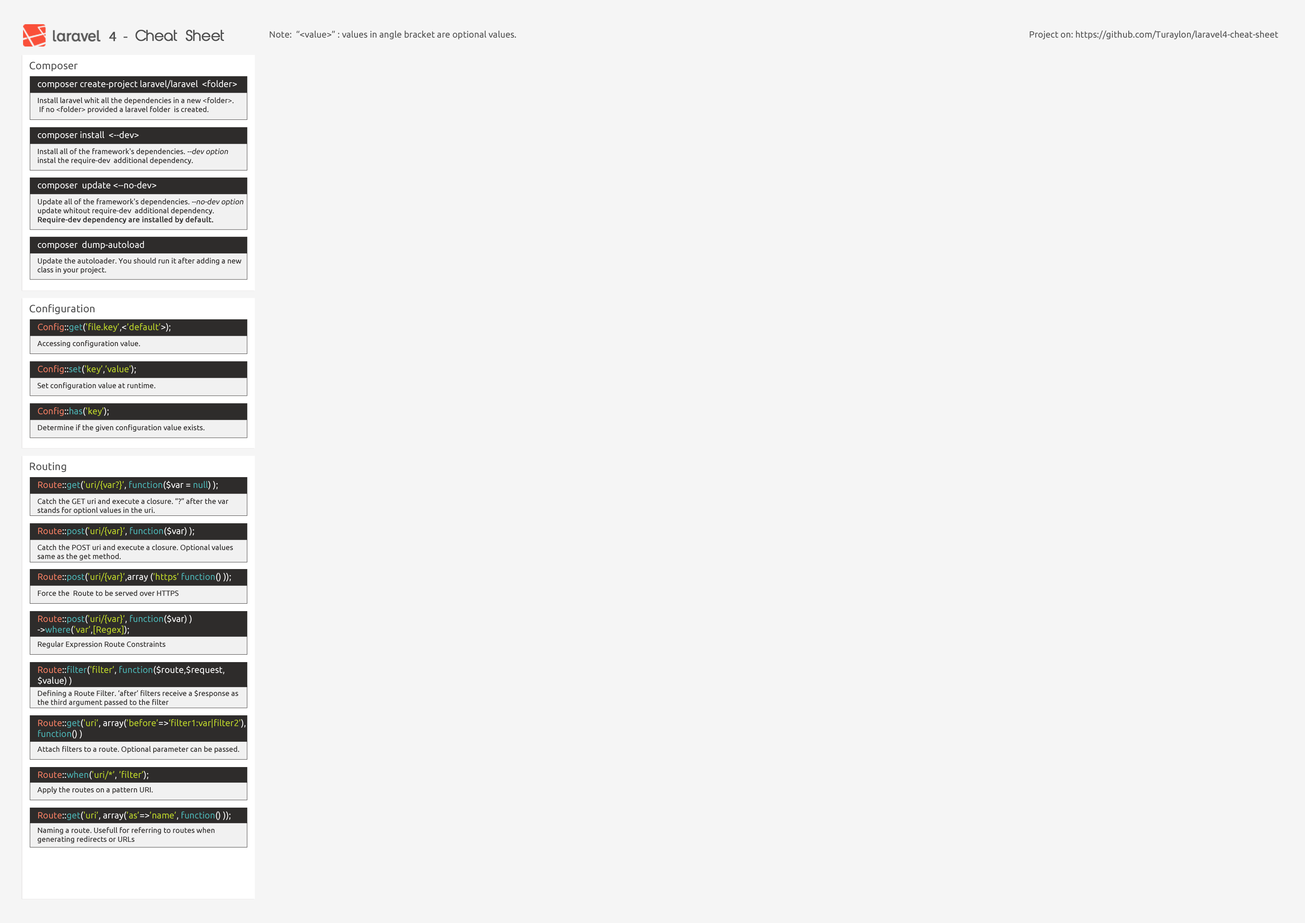
<style>
.page{position:relative;width:1305px;height:923px;background:#f5f5f5}
.page>*{position:absolute;margin:0}
.t1{font:14px "AbeatbyKai";color:#515151;font-weight:bold}
.t2{font:14px "MyriadPro-Regular";color:#515151;font-weight:bold}
.t3{font:9px "Ubuntu";color:#515151}
.t4{font:10.5px "Ubuntu";color:#515151}
.t5{font:9px "Ubuntu";color:#ffffff}
.t6{font:7.5px "Ubuntu";color:#2e2c2b}
.t7{font:7.5px "Ubuntu";color:#2e2c2b;font-style:italic}
.t8{font:7.5px "Ubuntu";color:#2e2c2b;font-weight:bold}
.t9{font:9px "Ubuntu";color:#bcd42a}
.t10{font:9px "Ubuntu";color:#ef7c61}
.t11{font:9px "Ubuntu";color:#4bb1b1}
</style>
<div class="page">
<p class="t1" style="left:109px;top:30px;width:115px;height:11px"><span class="t2">4  -</span> Cheat Sheet</p>
<p class="t3" style="left:270px;top:31px;width:246px;height:8px">Note:  “&lt;value&gt;” : values in angle bracket are optional values.</p>
<p class="t3" style="left:1030px;top:31px;width:248px;height:8px">Project on: https://github.com/Turaylon/laravel4-cheat-sheet</p>
<p class="t4" style="left:29px;top:62px;width:49px;height:9px">Composer</p>
<p class="t5" style="left:38px;top:80px;width:199px;height:9px">composer create-project laravel/laravel  &lt;folder&gt;</p>
<p class="t6" style="left:38px;top:97px;width:196px;height:16px">Install laravel whit all the dependencies in a new &lt;folder&gt;.<br> If no &lt;folder&gt; provided a laravel folder  is created.</p>
<p class="t5" style="left:38px;top:131px;width:101px;height:9px">composer install  &lt;--dev&gt;</p>
<p class="t6" style="left:38px;top:148px;width:190px;height:16px">Install all of the framework's dependencies. <span class="t7">--dev option <br></span>instal the require-dev  additional dependency.</p>
<p class="t5" style="left:38px;top:181px;width:118px;height:9px">composer  update &lt;--no-dev&gt;</p>
<p class="t6" style="left:38px;top:198px;width:205px;height:26px">Update all of the framework's dependencies. <span class="t7">--no-dev option <br></span>update whitout require-dev  additional dependency.<br><span class="t8">Require-dev dependency are installed by default.</span></p>
<p class="t5" style="left:38px;top:241px;width:106px;height:9px">composer  dump-autoload</p>
<p class="t6" style="left:38px;top:257px;width:203px;height:17px">Update the autoloader. You should run it after adding a new <br>class in your project.</p>
<p class="t4" style="left:29px;top:304px;width:66px;height:10px">Configuration</p>
<p class="t9" style="left:38px;top:323px;width:132px;height:9px"><span class="t10">Config</span><span class="t5">::</span><span class="t11">get</span><span class="t5">(</span>'file.key’<span class="t5">,&lt;</span>’default’<span class="t5">&gt;);</span></p>
<p class="t6" style="left:37px;top:340px;width:103px;height:8px">Accessing configuration value.</p>
<p class="t9" style="left:38px;top:365px;width:98px;height:9px"><span class="t10">Config</span><span class="t5">::</span><span class="t11">set</span><span class="t5">(</span>'key’<span class="t5">,</span>’value’<span class="t5">);</span></p>
<p class="t6" style="left:38px;top:382px;width:118px;height:8px">Set configuration value at runtime.</p>
<p class="t10" style="left:38px;top:407px;width:71px;height:9px">Config<span class="t5">::</span><span class="t11">has</span><span class="t5">(</span><span class="t9">'key’</span><span class="t5">);</span></p>
<p class="t6" style="left:38px;top:424px;width:167px;height:8px">Determine if the given configuration value exists.</p>
<p class="t4" style="left:30px;top:462px;width:36px;height:10px">Routing</p>
<p class="t9" style="left:38px;top:481px;width:180px;height:9px"><span class="t10">Route</span><span class="t5">::</span><span class="t11">get</span><span class="t5">(</span>'uri/{var?}’<span class="t5">, </span><span class="t11">function</span><span class="t5">($var = </span><span class="t11">null</span><span class="t5">) );</span></p>
<p class="t6" style="left:38px;top:498px;width:190px;height:16px">Catch the GET uri and execute a closure. “?” after the var <br>stands for optionl values in the uri.</p>
<p class="t9" style="left:38px;top:527px;width:156px;height:9px"><span class="t10">Route</span><span class="t5">::</span><span class="t11">post</span><span class="t5">(</span>'uri/{var}’<span class="t5">, </span><span class="t11">function</span><span class="t5">($var) );</span></p>
<p class="t6" style="left:38px;top:544px;width:195px;height:16px">Catch the POST uri and execute a closure. Optional values <br>same as the get method.</p>
<p class="t9" style="left:38px;top:573px;width:193px;height:9px"><span class="t10">Route</span><span class="t5">::</span><span class="t11">post</span><span class="t5">(</span>'uri/{var}’<span class="t5">,array (</span>’https’ <span class="t11">function</span><span class="t5">() ));</span></p>
<p class="t6" style="left:38px;top:590px;width:141px;height:6px">Force the  Route to be served over HTTPS</p>
<p class="t9" style="left:38px;top:615px;width:154px;height:19px"><span class="t10">Route</span><span class="t5">::</span><span class="t11">post</span><span class="t5">(</span>'uri/{var}’<span class="t5">, </span><span class="t11">function</span><span class="t5">($var) )<br>-&gt;</span><span class="t11">where</span><span class="t5">(</span>’var’<span class="t5">,</span>[Regex]<span class="t5">);</span></p>
<p class="t6" style="left:38px;top:641px;width:128px;height:7px">Regular Expression Route Constraints</p>
<p class="t5" style="left:38px;top:666px;width:186px;height:19px"><span class="t10">Route</span>::<span class="t11">filter</span>(<span class="t9">'filter’</span>, <span class="t11">function</span>($route,$request,<br>$value) )</p>
<p class="t6" style="left:38px;top:690px;width:200px;height:16px">Defining a Route Filter. ‘after’ filters receive a $response as <br>the third argument passed to the filter</p>
<p class="t9" style="left:38px;top:719px;width:208px;height:20px"><span class="t10">Route</span><span class="t5">::</span><span class="t11">get</span><span class="t5">(</span>'uri’<span class="t5">, array(</span>’before’<span class="t5">=&gt;</span>‘filter1:var|filter2’<span class="t5">),<br></span><span class="t11">function</span><span class="t5">() )</span></p>
<p class="t6" style="left:37px;top:746px;width:202px;height:7px">Attach filters to a route. Optional parameter can be passed.</p>
<p class="t9" style="left:38px;top:771px;width:110px;height:8px"><span class="t10">Route</span><span class="t5">::</span><span class="t11">when</span><span class="t5">(</span>'uri/*’<span class="t5">, </span>’filter’<span class="t5">);</span></p>
<p class="t6" style="left:37px;top:786px;width:116px;height:8px">Apply the routes on a pattern URI.</p>
<p class="t5" style="left:38px;top:811px;width:193px;height:9px"><span class="t10">Route</span>::<span class="t11">get</span>(<span class="t9">'uri’</span>, array(<span class="t9">’as’</span>=&gt;<span class="t9">’name’</span>, <span class="t11">function</span>() ));</p>
<p class="t6" style="left:38px;top:827px;width:177px;height:16px">Naming a route. Usefull for referring to routes when <br>generating redirects or URLs</p>
</div>
